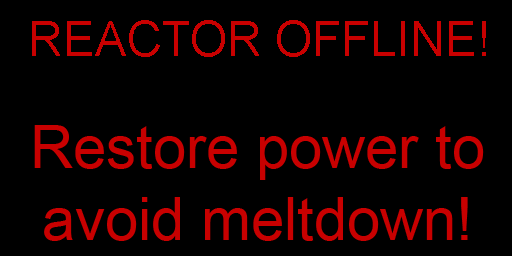
<style>
.page{position:relative;width:512px;height:256px;background:#000000}
.page>*{position:absolute;margin:0}
.t1{font:48px "ArialMT";color:#c80000}
.t2{font:60px "ArialMT";color:#c80000}
</style>
<div class="page">
<p class="t1" style="left:32px;top:20px;width:454px;height:37px">REACTOR OFFLINE!</p>
<p class="t2" style="left:34px;top:125px;width:450px;height:116px;text-align:center">Restore power to<br>avoid meltdown!</p>
</div>
